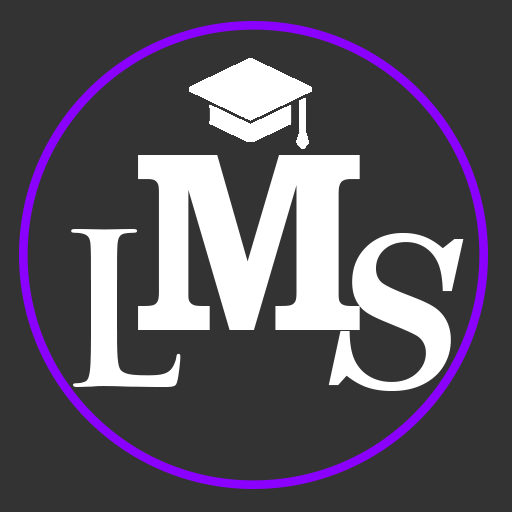
<style>
.page{position:relative;width:512px;height:512px;background:#333333}
.page>*{position:absolute;margin:0}
.t1{font:256.9px "BookmanOldStyle-Bold";color:#ffffff}
.t2{font:208.3px "TrajanPro-Bold";color:#ffffff}
.t3{font:208.3px "CenturySchoolbook-BoldItalic";color:#ffffff}
</style>
<div class="page">
<p class="t1" style="left:138px;top:155px;width:222px;height:175px">M</p>
<p class="t2" style="left:71px;top:229px;width:110px;height:159px">L</p>
<p class="t3" style="left:328px;top:233px;width:136px;height:158px">S</p>
</div>
